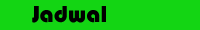
<style>
.page{position:relative;width:200px;height:30px;background:#13d513}
.page>*{position:absolute;margin:0}
.t1{font:24px "Bauhaus93";color:#000000}
</style>
<div class="page">
<p class="t1" style="left:32px;top:6px;width:74px;height:17px">Jadwal</p>
</div>
